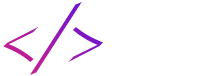
<style>
.page{position:relative;width:200px;height:76px;background:#ffffff}
.page>*{position:absolute;margin:0}
.t1{font:67.2px "Apple-Chancery"}
</style>
<div class="page">
<p class="t1" style="left:3px;top:2px;width:100px;height:73px">&lt;/&gt;</p>
</div>
